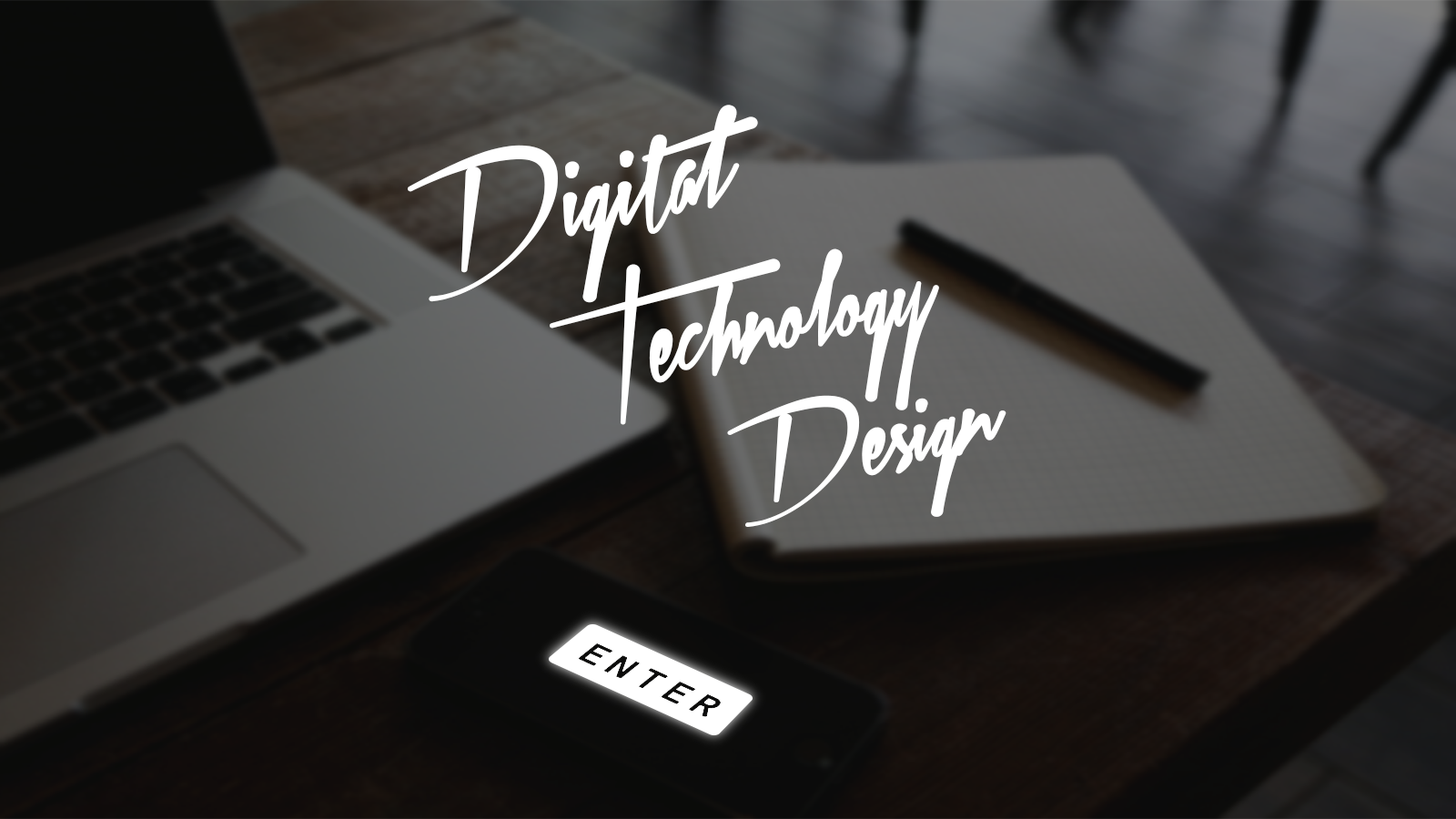
<style>
.page{position:relative;width:1456px;height:819px}
.page>*{position:absolute;margin:0}
.t1{font:92.7px "XtreemFatDemo";color:#ffffff;scale:1.15 1}
.t2{font:87.8px "XtreemFatDemo";color:#ffffff;scale:1.06 1}
.t3{font:77.6px "XtreemFatDemo";color:#ffffff;scale:1.2 1}
</style>
<div class="page">
<p class="t1" style="left:408px;top:105px;width:350px;height:198px;rotate:-12deg">Digital</p>
<p class="t2" style="left:550px;top:248px;width:389px;height:177px;rotate:-12deg">Technology</p>
<p class="t3" style="left:727px;top:395px;width:279px;height:132px;rotate:-12deg">Design</p>
</div>
